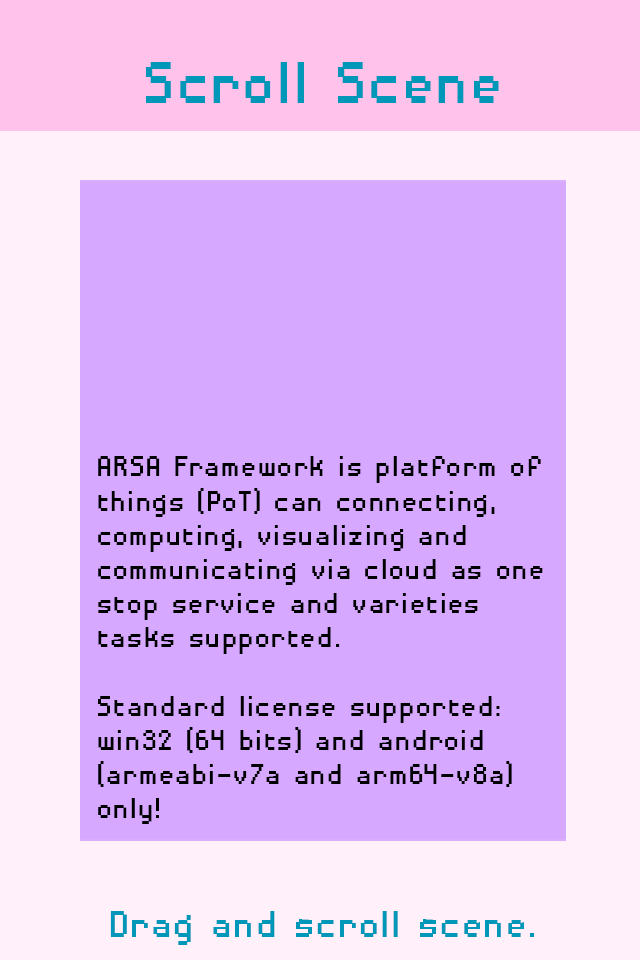
<style>
.page{position:relative;width:640px;height:960px;background:#d6a8ff}
.page>*{position:absolute;margin:0}
.t1{font:76.6px "DisposableDroidBB";color:#0097b8;scale:0.91 1}
.t2{font:36.7px/34.2px "DisposableDroidBB";color:#000000;scale:0.93 1}
.t3{font:49.5px "DisposableDroidBB";color:#0097b8;scale:0.91 1}
</style>
<div class="page">
<p class="t1" style="left:146px;top:62px;width:353px;height:41px">Scroll Scene</p>
<p class="t2" style="left:98px;top:456px;width:445px;height:368px">ARSA Framework is platform of <br>things (PoT) can connecting, <br>computing, visualizing and <br>communicating via cloud as one <br>stop service and varieties <br>tasks supported.<br><br>Standard license supported: <br>win32 (64 bits) and android <br>(armeabi-v7a and arm64-v8a) <br>only!</p>
<p class="t3" style="left:110px;top:911px;width:425px;height:34px">Drag and scroll scene.</p>
</div>
